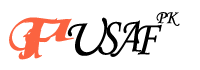
<style>
.page{position:relative;width:200px;height:70px;background:#ffffff}
.page>*{position:absolute;margin:0}
.t1{font:61.7px "TirantiSolidLetPlain";color:#fb6340;scale:0.97 1}
.t2{font:54.4px "MonotypeCorsiva";color:#000000;scale:1.06 1}
.t3{font:18.3px "MonotypeCorsiva";color:#000000}
.t4{font:73.9px "TirantiSolidLetPlain";color:#fb6340;scale:0.74 1}
.t5{font:58px "TirantiSolidLetPlain";color:#fb6340;scale:2.38 1}
.t6{font:35.3px "TirantiSolidLetPlain";color:#fb6340;scale:5.96 1}
.t7{font:50px "MonotypeCorsiva";color:#000000;scale:0.9 1}
.t8{font:53.3px "TirantiSolidLetPlain";color:#fb6340;scale:1.35 1}
</style>
<div class="page">
<p class="t1" style="left:9px;top:17px;width:49px;height:43px;rotate:1deg">F</p>
<p class="t2" style="left:67px;top:17px;width:41px;height:39px">U</p>
<p class="t3" style="left:156px;top:12px;width:24px;height:14px;rotate:1deg">PK</p>
<p class="t4" style="left:23px;top:28px;width:14px;height:30px">s</p>
<p class="t5" style="left:24px;top:18px;width:51px;height:24px;rotate:-1deg">u</p>
<p class="t4" style="left:24px;top:29px;width:18px;height:30px">a</p>
<p class="t6" style="left:51px;top:19px;width:18px;height:5px;rotate:-1deg">.</p>
<p class="t7" style="left:98px;top:21px;width:24px;height:34px">S</p>
<p class="t7" style="left:110px;top:20px;width:32px;height:37px">A</p>
<p class="t7" style="left:135px;top:24px;width:27px;height:31px">F</p>
<p class="t8" style="left:26px;top:33px;width:7px;height:7px;rotate:-3deg">.</p>
</div>
